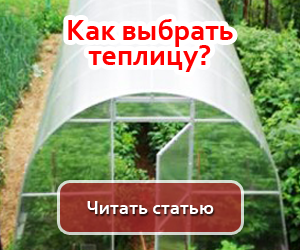
<style>
.page{position:relative;width:300px;height:250px}
.page>*{position:absolute;margin:0}
.t1{font:30px/25.2px "Corbel-Bold";color:#ff0000}
.t2{font:20px "Corbel-Bold";color:#ffffff}
</style>
<div class="page">
<p class="t1" style="left:68px;top:19px;width:165px;height:53px;text-align:center">Как выбрать <br>теплицу?</p>
<p class="t2" style="left:87px;top:201px;width:127px;height:13px">Читать статью</p>
</div>
